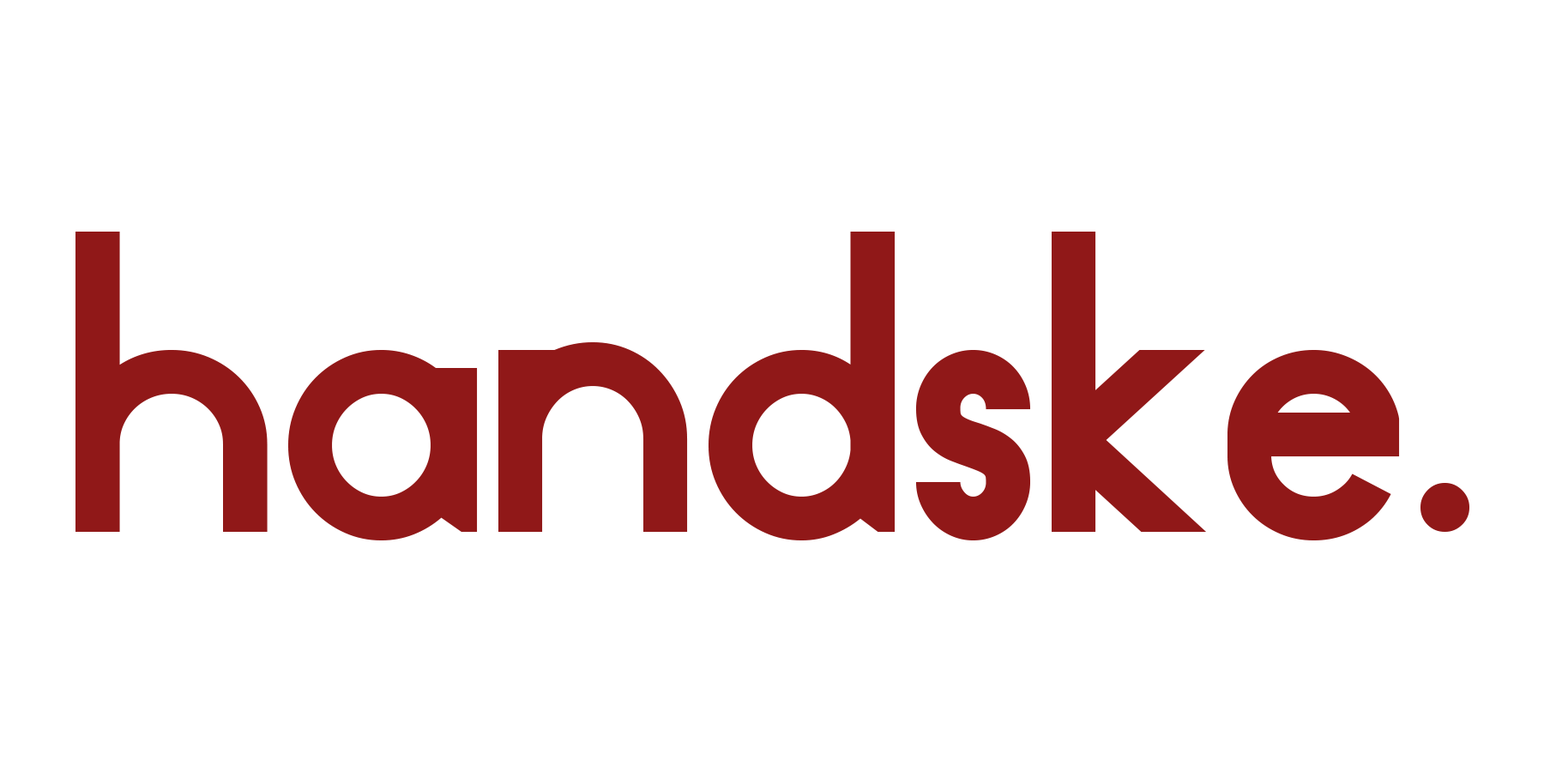
<style>
.page{position:relative;width:1544px;height:772px;background:#ffffff}
.page>*{position:absolute;margin:0}
.t1{font:429px "koliko-Regular";color:#901818}
</style>
<div class="page">
<p class="t1" style="left:75px;top:232px;width:1395px;height:309px">handske.</p>
</div>
